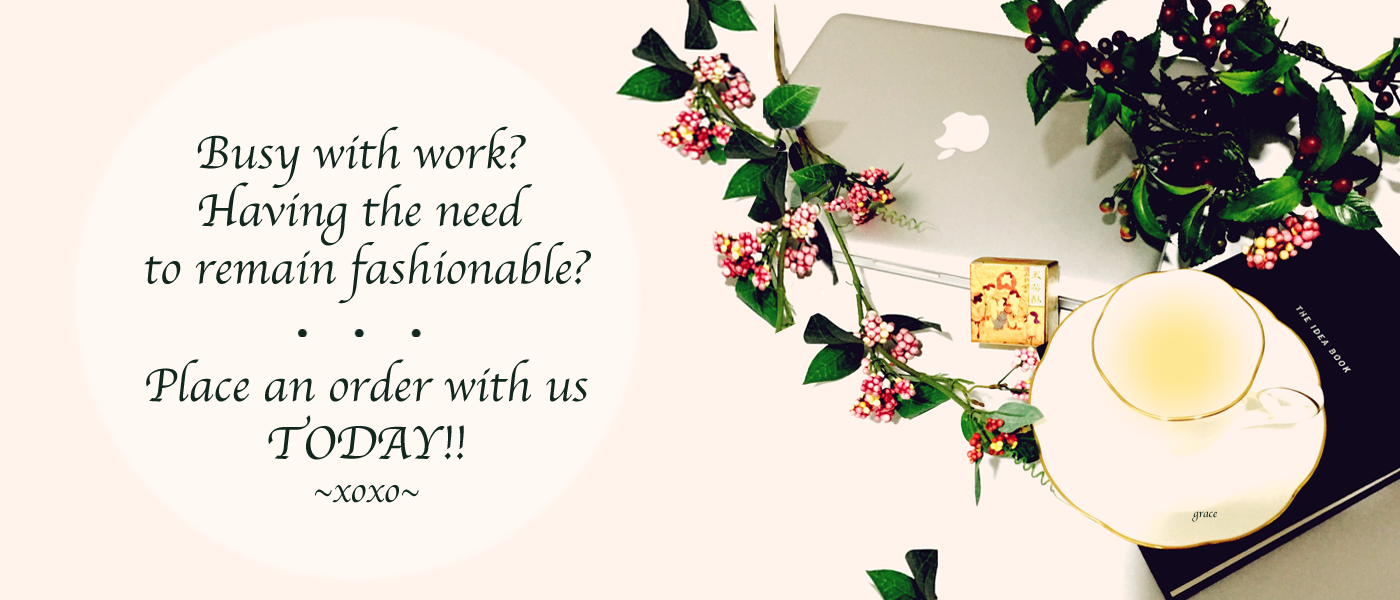
<style>
.page{position:relative;width:1400px;height:600px;background:#fff3eb}
.page>*{position:absolute;margin:0}
.t1{font:48px "Apple-Chancery";color:#12281f}
.t2{font:36px "Apple-Chancery";color:#12281f}
</style>
<div class="page">
<p class="t1" style="left:144px;top:126px;width:447px;height:377px;text-align:center">Busy with work? <br>Having the need <br>to remain fashionable?<br><br><br><br><br>Place an order with us<br>TODAY!!<br><span class="t2">~xoxo~</span></p>
</div>
